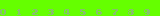
<style>
.page{position:relative;width:160px;height:16px;background:#65ff00}
.page>*{position:absolute;margin:0}
.t1{font:8px "Early-GameBoy";color:#86c06c}
</style>
<div class="page">
<p class="t1" style="left:0px;top:9px;width:150px;height:6px">0  1  2  3  4  5  6  7  8  9</p>
</div>
